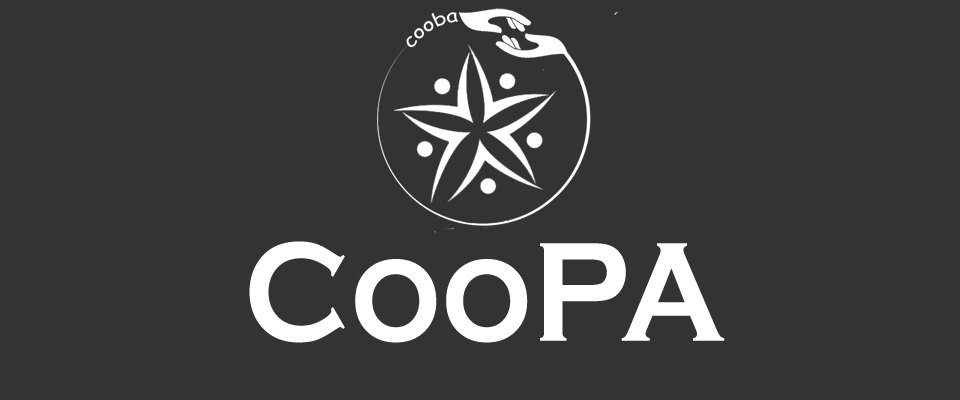
<style>
.page{position:relative;width:960px;height:400px;background:#333333}
.page>*{position:absolute;margin:0}
.t1{font:146px "CopperplateGothic-Bold";letter-spacing:0.01em;color:#ffffff;scale:0.86 1}
</style>
<div class="page">
<p class="t1" style="left:249px;top:241px;width:476px;height:102px">CooPA</p>
</div>
